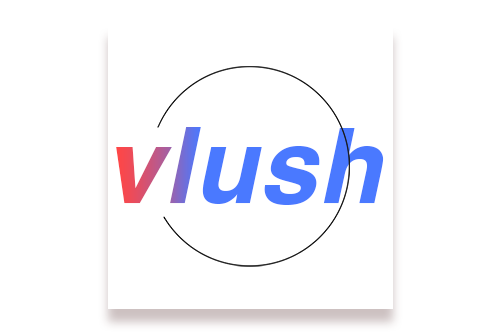
<style>
.page{position:relative;width:500px;height:333px;background:#ffffff}
.page>*{position:absolute;margin:0}
.t1{font:104.8px "Helvetica-BoldOblique";letter-spacing:0.01em;color:#4a79ff}
</style>
<div class="page">
<p class="t1" style="left:116px;top:127px;width:268px;height:78px">vlush</p>
</div>
